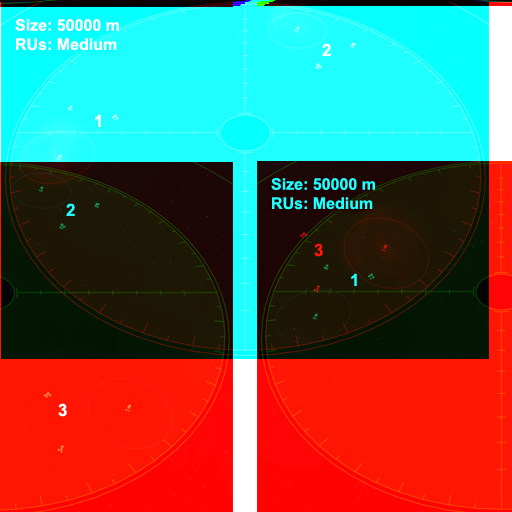
<style>
.page{position:relative;width:512px;height:512px}
.page>*{position:absolute;margin:0}
.t1{font:16px "Arial-BoldMT"}
.t2{font:17px "Arial-BoldMT"}
</style>
<div class="page">
<p class="t1" style="left:15px;top:17px;width:104px;height:32px">Size: 50000 m<br>RUs: Medium</p>
<p class="t2" style="left:95px;top:112px;width:6px;height:13px">1</p>
</div>
